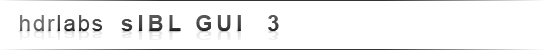
<style>
.page{position:relative;width:550px;height:50px;background:#ffffff}
.page>*{position:absolute;margin:0}
.t1{font:21.6px "Arial-BoldMT";letter-spacing:0.2em;color:#000000}
.t2{font:21.6px "ArialMT";letter-spacing:0.1em;color:#4d4d4d}
.t3{font:21.6px "ArialMT";letter-spacing:0.1em;color:#000000}
.t4{font:11.6px "Arial-BoldMT";letter-spacing:0.2em;color:#eaeaea;scale:1.86 1}
.t5{font:11.6px "ArialMT";letter-spacing:0.1em;color:#eaeaea;scale:1.86 1}
</style>
<div class="page">
<p class="t1" style="left:20px;top:15px;width:259px;height:16px"><span class="t2">hdr</span><span class="t3">labs  </span>sIBL GUI  3</p>
<p class="t1" style="left:20px;top:15px;width:259px;height:16px"><span class="t2">hdr</span><span class="t3">labs  </span>sIBL GUI  3</p>
<p class="t4" style="left:20px;top:31px;width:259px;height:9px"><span class="t5">hdr</span><span class="t5">labs  </span>sIBL GUI  3</p>
</div>
